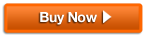
<style>
.page{position:relative;width:147px;height:38px;background:#ffffff}
.page>*{position:absolute;margin:0}
.t1{font:14px "HelveticaNeue-Bold";letter-spacing:-0.02em;color:#ffffff}
</style>
<div class="page">
<p class="t1" style="left:40px;top:12px;width:57px;height:13px">Buy Now</p>
</div>
